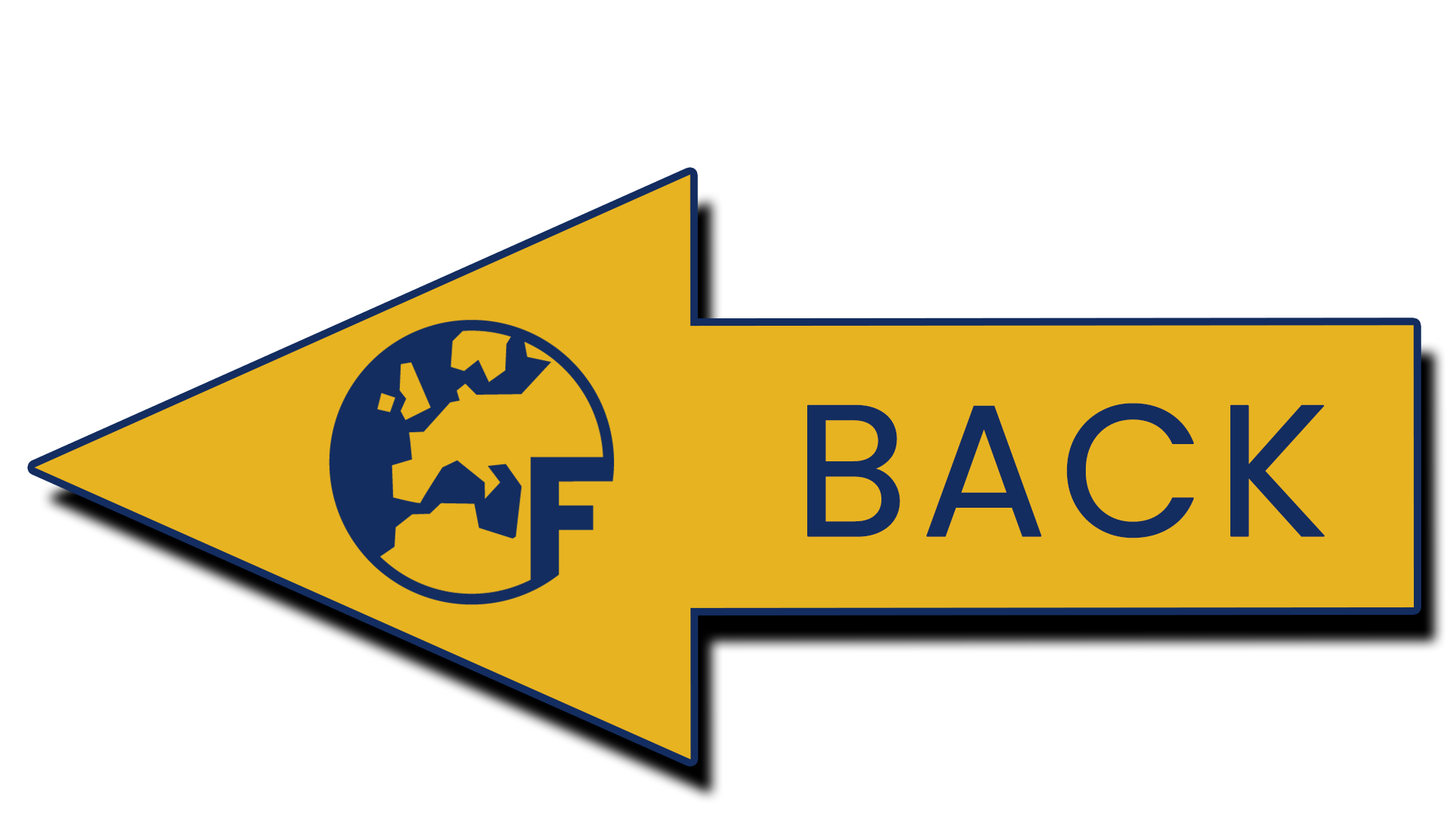
<style>
.page{position:relative;width:1449px;height:823px;background:#ffffff}
.page>*{position:absolute;margin:0}
.t1{font:187.2px "Poppins-Regular";letter-spacing:0.04em;color:#132d60;text-transform:uppercase;font-weight:bold}
</style>
<div class="page">
<p class="t1" style="left:807px;top:403px;width:518px;height:135px">Back</p>
</div>
